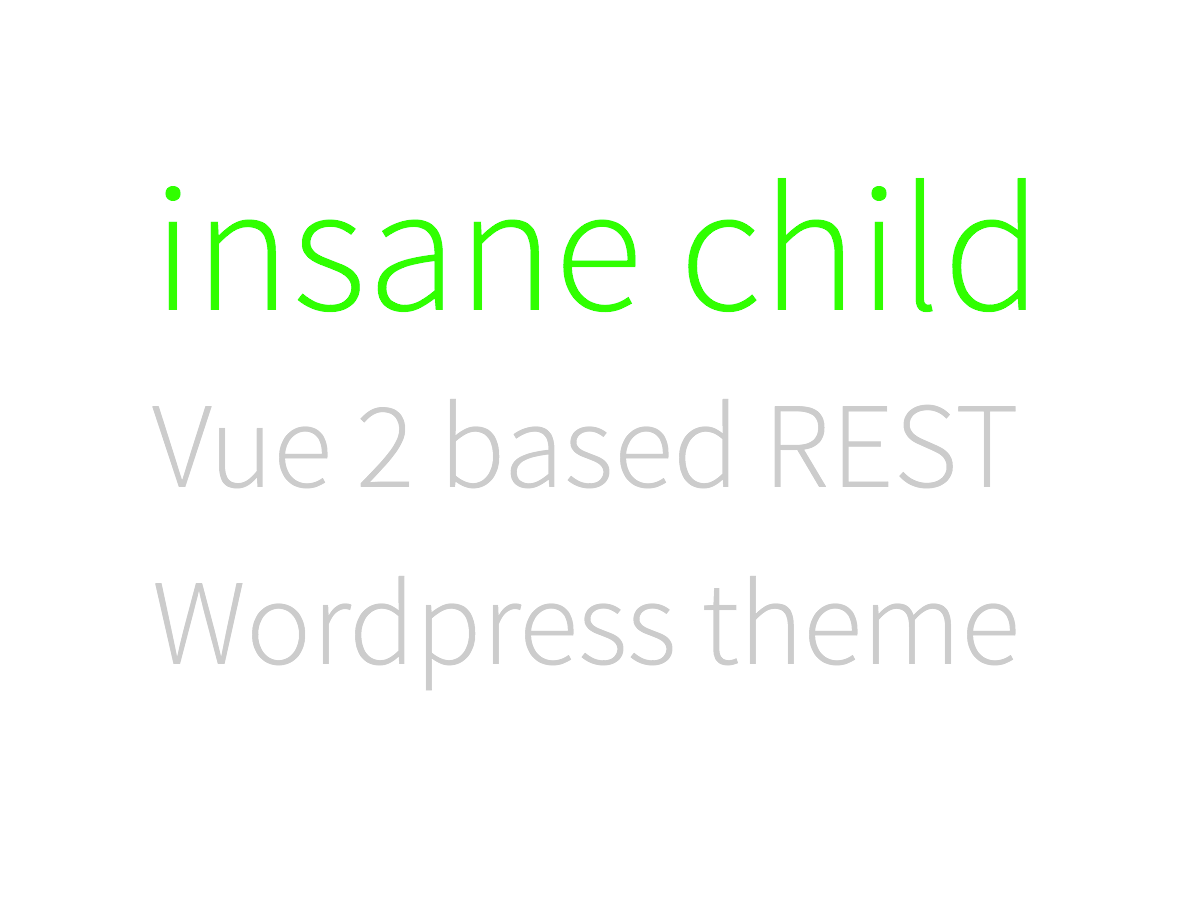
<style>
.page{position:relative;width:1200px;height:900px;background:#ffffff}
.page>*{position:absolute;margin:0}
.t1{font:121.9px "SourceSansPro-Light";color:#cccccc}
.t2{font:182.9px "SourceSansPro-Light";color:#30ff00}
</style>
<div class="page">
<p class="t1" style="left:152px;top:177px;width:874px;height:514px"><span class="t2">insane child<br></span>Vue 2 based REST<br>Wordpress theme</p>
</div>
